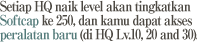
<style>
.page{position:relative;width:197px;height:42px;background:#ffffff}
.page>*{position:absolute;margin:0}
.t1{font:14px/14px "RyuminPro-ExBold";letter-spacing:-0.08em;color:#4c4842;scale:0.9 1}
.t2{font:14px/14px "RyuminPro-ExBold";letter-spacing:-0.08em;color:#547b7a;scale:0.9 1}
</style>
<div class="page">
<p class="t1" style="left:0px;top:0px;width:199px;height:42px">Setiap HQ naik level akan tingkatkan<br><span class="t2">Softcap </span>ke 250, dan kamu dapat akses<br><span class="t2">peralatan baru</span> (di HQ Lv.10, 20 and 30).</p>
</div>
